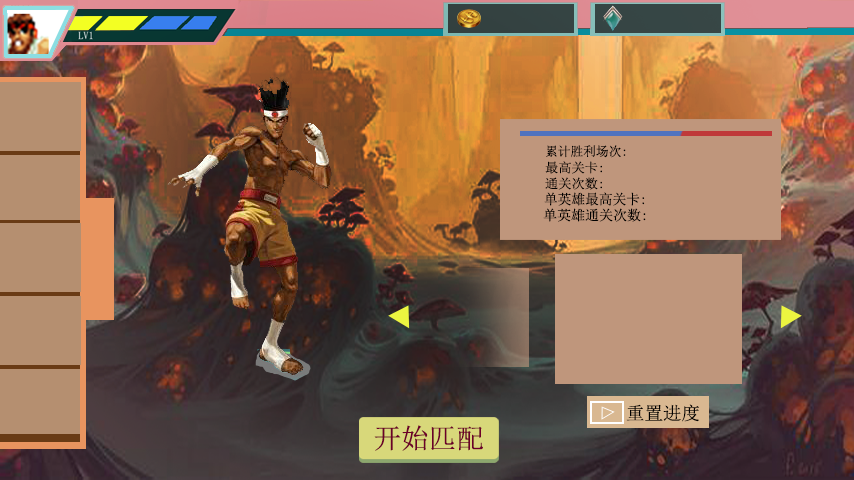
<style>
.page{position:relative;width:854px;height:480px}
.page>*{position:absolute;margin:0}
.t1{font:12.9px "SimSun";color:#000000}
.t2{font:13px "SimSun";color:#000000}
.t3{font:14px "SimSun";color:#000000}
.t4{font:18px "SimSun";color:#000000}
.t5{font:27.6px "SimSun";color:#6c0029}
</style>
<div class="page">
<p class="t1" style="left:546px;top:145px;width:80px;height:13px">累计胜利场次:</p>
<p class="t2" style="left:545px;top:161px;width:57px;height:13px">最高关卡:</p>
<p class="t2" style="left:545px;top:177px;width:57px;height:13px">通关次数:</p>
<p class="t3" style="left:544px;top:192px;width:101px;height:14px">单英雄最高关卡:</p>
<p class="t3" style="left:543px;top:208px;width:103px;height:14px">单英雄通关次数:</p>
<p class="t4" style="left:626px;top:404px;width:73px;height:18px">重置进度</p>
<p class="t5" style="left:374px;top:425px;width:109px;height:26px">开始匹配</p>
</div>
